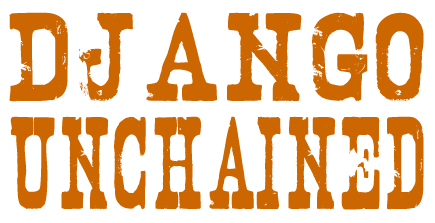
<style>
.page{position:relative;width:435px;height:223px;background:#ffffff}
.page>*{position:absolute;margin:0}
.t1{font:110px "Nashville";color:#cc6600;scale:1.67 1}
.t2{font:115px "Nashville";color:#cc6600}
</style>
<div class="page">
<p class="t1" style="left:9px;top:12px;width:415px;height:90px">django</p>
<p class="t2" style="left:10px;top:116px;width:414px;height:94px">unchained</p>
</div>
